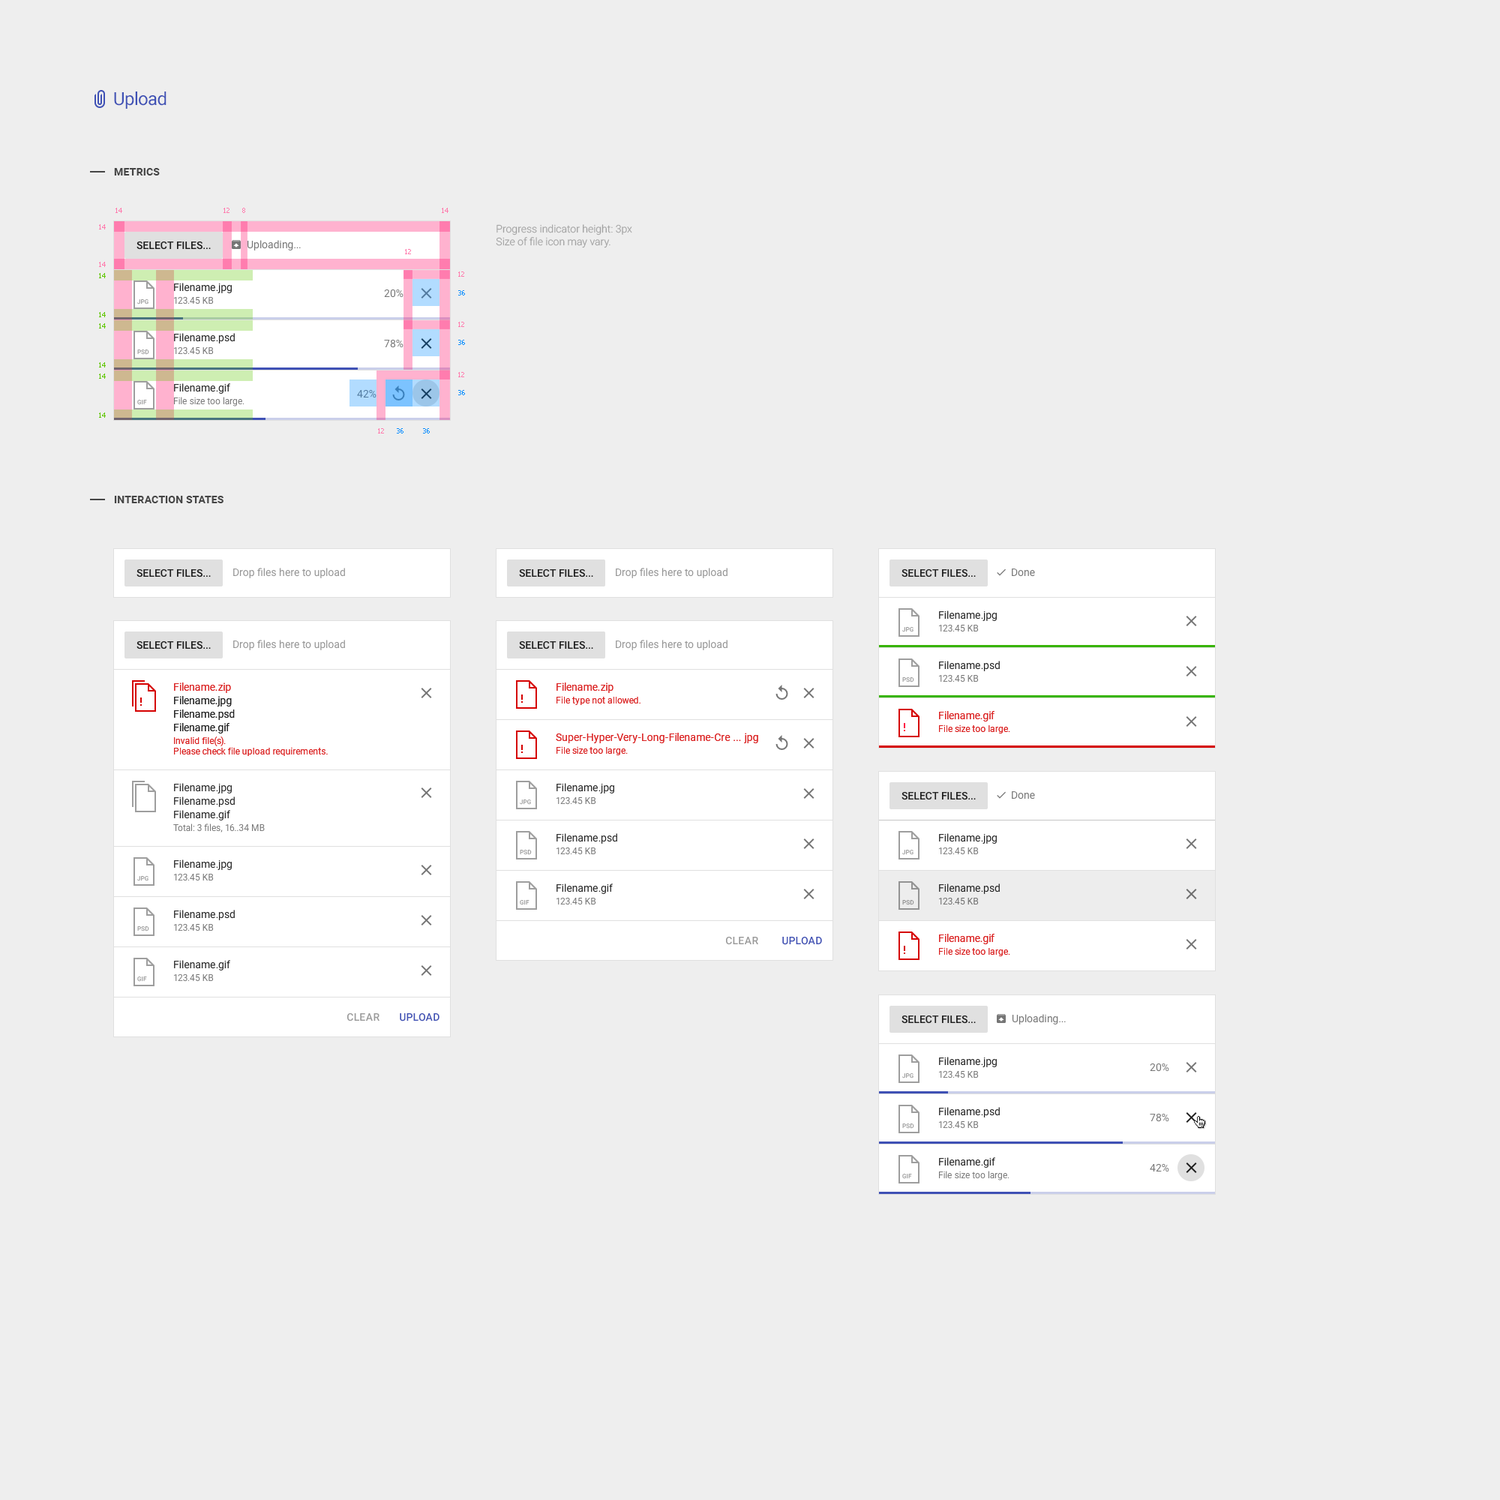
<style>
.page{position:relative;width:1500px;height:1500px;background:#eeeeee}
.page>*{position:absolute;margin:0}
.t1{font:18px "Roboto-Regular";letter-spacing:-0.025em;color:#3f51b5}
.t2{font:10.5px "Roboto-Bold";letter-spacing:0.01em;color:#454545;text-transform:uppercase}
.t3{font:6.8px "Tahoma";color:#ff7cae}
.t4{font:10.5px "Roboto-Light";color:#a1a1a1}
.t5{font:10.5px "Roboto-Medium";color:#1d1d1d;text-transform:uppercase}
.t6{font:10.5px "Roboto-Regular";color:#757575}
.t7{font:6.8px "Tahoma";color:#5ec600}
.t8{font:10.5px "Roboto-Regular";color:#212121}
.t9{font:6.8px "Tahoma";color:#008aff}
.t10{font:6px "Roboto-Regular";text-transform:uppercase}
.t11{font:9px "Roboto-Regular";color:#757575}
.t12{font:10.5px "Roboto-Regular";color:#527b9f}
.t13{font:10.5px "Roboto-Regular";color:#949494}
.t14{font:10.5px/13.5px "Roboto-Regular";color:#212121}
.t15{font:10.5px "Roboto-Regular";color:#da2121}
.t16{font:9px "Roboto-Regular";color:#da2121}
.t17{font:10.5px "Roboto-Regular";color:#1f1f1f}
.t18{font:9px "Roboto-Regular";color:#6d6d6d}
.t19{font:10.5px "Roboto-Medium";letter-spacing:0.01em;color:#9a9a9a}
.t20{font:10.5px "Roboto-Medium";letter-spacing:0.01em;color:#3f51b5}
</style>
<div class="page">
<p class="t1" style="left:114px;top:92px;width:52px;height:17px">Upload</p>
<p class="t2" style="left:114px;top:168px;width:46px;height:8px">Metrics</p>
<p class="t3" style="left:116px;top:208px;width:6px;height:5px">14</p>
<p class="t3" style="left:224px;top:208px;width:6px;height:5px">12</p>
<p class="t3" style="left:242px;top:208px;width:3px;height:5px">8</p>
<p class="t3" style="left:442px;top:208px;width:6px;height:5px">14</p>
<p class="t3" style="left:99px;top:224px;width:7px;height:6px">14</p>
<p class="t4" style="left:496px;top:224px;width:136px;height:24px">Progress indicator height: 3px<br>Size of file icon may vary.</p>
<p class="t5" style="left:136px;top:241px;width:75px;height:9px">Select Files...</p>
<p class="t6" style="left:247px;top:240px;width:54px;height:10px">Uploading...</p>
<p class="t3" style="left:405px;top:249px;width:6px;height:5px">12</p>
<p class="t3" style="left:99px;top:262px;width:7px;height:5px">14</p>
<p class="t7" style="left:99px;top:273px;width:7px;height:5px">14</p>
<p class="t3" style="left:458px;top:272px;width:6px;height:5px">12</p>
<p class="t8" style="left:174px;top:283px;width:58px;height:10px">Filename.jpg</p>
<p class="t6" style="left:384px;top:289px;width:20px;height:9px">20%</p>
<p class="t9" style="left:458px;top:290px;width:7px;height:6px">36</p>
<p class="t10" style="left:137px;top:299px;width:11px;height:5px">JPG</p>
<p class="t11" style="left:174px;top:296px;width:40px;height:8px">123.45 KB</p>
<p class="t7" style="left:99px;top:312px;width:7px;height:5px">14</p>
<p class="t7" style="left:99px;top:323px;width:7px;height:5px">14</p>
<p class="t3" style="left:458px;top:322px;width:6px;height:5px">12</p>
<p class="t8" style="left:174px;top:333px;width:61px;height:11px">Filename.psd</p>
<p class="t6" style="left:384px;top:339px;width:20px;height:9px">78%</p>
<p class="t9" style="left:458px;top:340px;width:7px;height:5px">36</p>
<p class="t10" style="left:137px;top:350px;width:12px;height:5px">PSD</p>
<p class="t11" style="left:174px;top:346px;width:40px;height:9px">123.45 KB</p>
<p class="t7" style="left:99px;top:362px;width:7px;height:6px">14</p>
<p class="t7" style="left:99px;top:374px;width:7px;height:5px">14</p>
<p class="t3" style="left:458px;top:372px;width:6px;height:5px">12</p>
<p class="t8" style="left:174px;top:383px;width:56px;height:11px">Filename.gif</p>
<p class="t12" style="left:357px;top:389px;width:19px;height:9px">42%</p>
<p class="t9" style="left:458px;top:390px;width:7px;height:5px">36</p>
<p class="t10" style="left:137px;top:400px;width:10px;height:5px">GIF</p>
<p class="t11" style="left:174px;top:397px;width:70px;height:9px">File size too large.</p>
<p class="t7" style="left:99px;top:412px;width:7px;height:6px">14</p>
<p class="t3" style="left:378px;top:428px;width:6px;height:6px">12</p>
<p class="t9" style="left:397px;top:428px;width:7px;height:6px">36</p>
<p class="t9" style="left:423px;top:428px;width:7px;height:6px">36</p>
<p class="t2" style="left:114px;top:496px;width:110px;height:7px">Interaction states</p>
<p class="t5" style="left:136px;top:568px;width:75px;height:10px">Select Files...</p>
<p class="t13" style="left:233px;top:568px;width:112px;height:10px">Drop files here to upload</p>
<p class="t5" style="left:519px;top:568px;width:74px;height:10px">Select Files...</p>
<p class="t13" style="left:616px;top:568px;width:112px;height:10px">Drop files here to upload</p>
<p class="t5" style="left:902px;top:568px;width:74px;height:10px">Select Files...</p>
<p class="t6" style="left:1012px;top:568px;width:23px;height:9px">Done</p>
<p class="t8" style="left:939px;top:610px;width:58px;height:11px">Filename.jpg</p>
<p class="t10" style="left:902px;top:627px;width:12px;height:5px">JPG</p>
<p class="t11" style="left:939px;top:624px;width:40px;height:8px">123.45 KB</p>
<p class="t5" style="left:136px;top:640px;width:75px;height:10px">Select Files...</p>
<p class="t13" style="left:233px;top:640px;width:112px;height:10px">Drop files here to upload</p>
<p class="t5" style="left:519px;top:640px;width:74px;height:10px">Select Files...</p>
<p class="t13" style="left:616px;top:640px;width:112px;height:10px">Drop files here to upload</p>
<p class="t8" style="left:939px;top:661px;width:61px;height:10px">Filename.psd</p>
<p class="t10" style="left:902px;top:677px;width:12px;height:5px">PSD</p>
<p class="t11" style="left:939px;top:674px;width:40px;height:8px">123.45 KB</p>
<p class="t14" style="left:174px;top:682px;width:61px;height:52px">Filename.zip<br>Filename.jpg<br>Filename.psd<br>Filename.gif</p>
<p class="t15" style="left:556px;top:682px;width:58px;height:11px">Filename.zip</p>
<p class="t16" style="left:556px;top:696px;width:84px;height:9px">File type not allowed.</p>
<p class="t15" style="left:939px;top:711px;width:55px;height:11px">Filename.gif</p>
<p class="t16" style="left:939px;top:724px;width:71px;height:10px">File size too large.</p>
<p class="t16" style="left:174px;top:736px;width:154px;height:20px">Invalid file(s).<br>Please check file upload requirements.</p>
<p class="t15" style="left:556px;top:733px;width:202px;height:10px">Super-Hyper-Very-Long-Filename-Cre ... jpg</p>
<p class="t16" style="left:556px;top:746px;width:72px;height:9px">File size too large.</p>
<p class="t14" style="left:174px;top:783px;width:61px;height:37px">Filename.jpg<br>Filename.psd<br>Filename.gif</p>
<p class="t8" style="left:556px;top:783px;width:58px;height:11px">Filename.jpg</p>
<p class="t11" style="left:556px;top:796px;width:40px;height:9px">123.45 KB</p>
<p class="t5" style="left:902px;top:791px;width:74px;height:9px">Select Files...</p>
<p class="t6" style="left:1012px;top:791px;width:23px;height:9px">Done</p>
<p class="t10" style="left:520px;top:800px;width:11px;height:5px">JPG</p>
<p class="t11" style="left:173px;top:824px;width:92px;height:8px">Total: 3 files, 16..34 MB</p>
<p class="t8" style="left:556px;top:833px;width:61px;height:11px">Filename.psd</p>
<p class="t8" style="left:939px;top:833px;width:58px;height:11px">Filename.jpg</p>
<p class="t10" style="left:520px;top:850px;width:12px;height:5px">PSD</p>
<p class="t11" style="left:556px;top:847px;width:40px;height:8px">123.45 KB</p>
<p class="t10" style="left:902px;top:850px;width:12px;height:5px">JPG</p>
<p class="t11" style="left:939px;top:847px;width:40px;height:8px">123.45 KB</p>
<p class="t8" style="left:174px;top:860px;width:58px;height:10px">Filename.jpg</p>
<p class="t10" style="left:137px;top:876px;width:11px;height:5px">JPG</p>
<p class="t11" style="left:174px;top:873px;width:40px;height:8px">123.45 KB</p>
<p class="t8" style="left:556px;top:884px;width:57px;height:10px">Filename.gif</p>
<p class="t17" style="left:939px;top:884px;width:61px;height:10px">Filename.psd</p>
<p class="t10" style="left:520px;top:900px;width:10px;height:5px">GIF</p>
<p class="t11" style="left:556px;top:897px;width:40px;height:8px">123.45 KB</p>
<p class="t10" style="left:902px;top:900px;width:12px;height:5px">PSD</p>
<p class="t18" style="left:939px;top:897px;width:40px;height:8px">123.45 KB</p>
<p class="t8" style="left:174px;top:910px;width:61px;height:10px">Filename.psd</p>
<p class="t10" style="left:137px;top:926px;width:12px;height:6px">PSD</p>
<p class="t11" style="left:174px;top:923px;width:40px;height:9px">123.45 KB</p>
<p class="t19" style="left:726px;top:937px;width:32px;height:8px">CLEAR</p>
<p class="t20" style="left:782px;top:937px;width:40px;height:8px">UPLOAD</p>
<p class="t15" style="left:939px;top:934px;width:55px;height:10px">Filename.gif</p>
<p class="t16" style="left:939px;top:947px;width:71px;height:9px">File size too large.</p>
<p class="t8" style="left:174px;top:960px;width:56px;height:10px">Filename.gif</p>
<p class="t10" style="left:137px;top:976px;width:10px;height:6px">GIF</p>
<p class="t11" style="left:174px;top:974px;width:40px;height:8px">123.45 KB</p>
<p class="t19" style="left:347px;top:1013px;width:33px;height:9px">CLEAR</p>
<p class="t20" style="left:400px;top:1013px;width:40px;height:9px">UPLOAD</p>
<p class="t6" style="left:1012px;top:1014px;width:54px;height:10px">Uploading...</p>
<p class="t5" style="left:902px;top:1015px;width:74px;height:9px">Select Files...</p>
<p class="t8" style="left:939px;top:1057px;width:58px;height:10px">Filename.jpg</p>
<p class="t10" style="left:902px;top:1073px;width:12px;height:5px">JPG</p>
<p class="t11" style="left:939px;top:1070px;width:40px;height:8px">123.45 KB</p>
<p class="t6" style="left:1150px;top:1063px;width:19px;height:9px">20%</p>
<p class="t8" style="left:939px;top:1107px;width:61px;height:11px">Filename.psd</p>
<p class="t11" style="left:939px;top:1120px;width:40px;height:9px">123.45 KB</p>
<p class="t6" style="left:1150px;top:1113px;width:19px;height:9px">78%</p>
<p class="t10" style="left:902px;top:1124px;width:12px;height:5px">PSD</p>
<p class="t8" style="left:939px;top:1157px;width:56px;height:11px">Filename.gif</p>
<p class="t6" style="left:1150px;top:1163px;width:19px;height:9px">42%</p>
<p class="t10" style="left:902px;top:1174px;width:10px;height:5px">GIF</p>
<p class="t11" style="left:939px;top:1171px;width:71px;height:9px">File size too large.</p>
</div>
